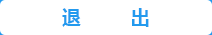
<style>
.page{position:relative;width:212px;height:35px;background:#ffffff}
.page>*{position:absolute;margin:0}
.t1{font:18.7px "MicrosoftYaHeiUI-Bold";color:#239aee}
</style>
<div class="page">
<p class="t1" style="left:62px;top:8px;width:87px;height:19px">退         出</p>
</div>
